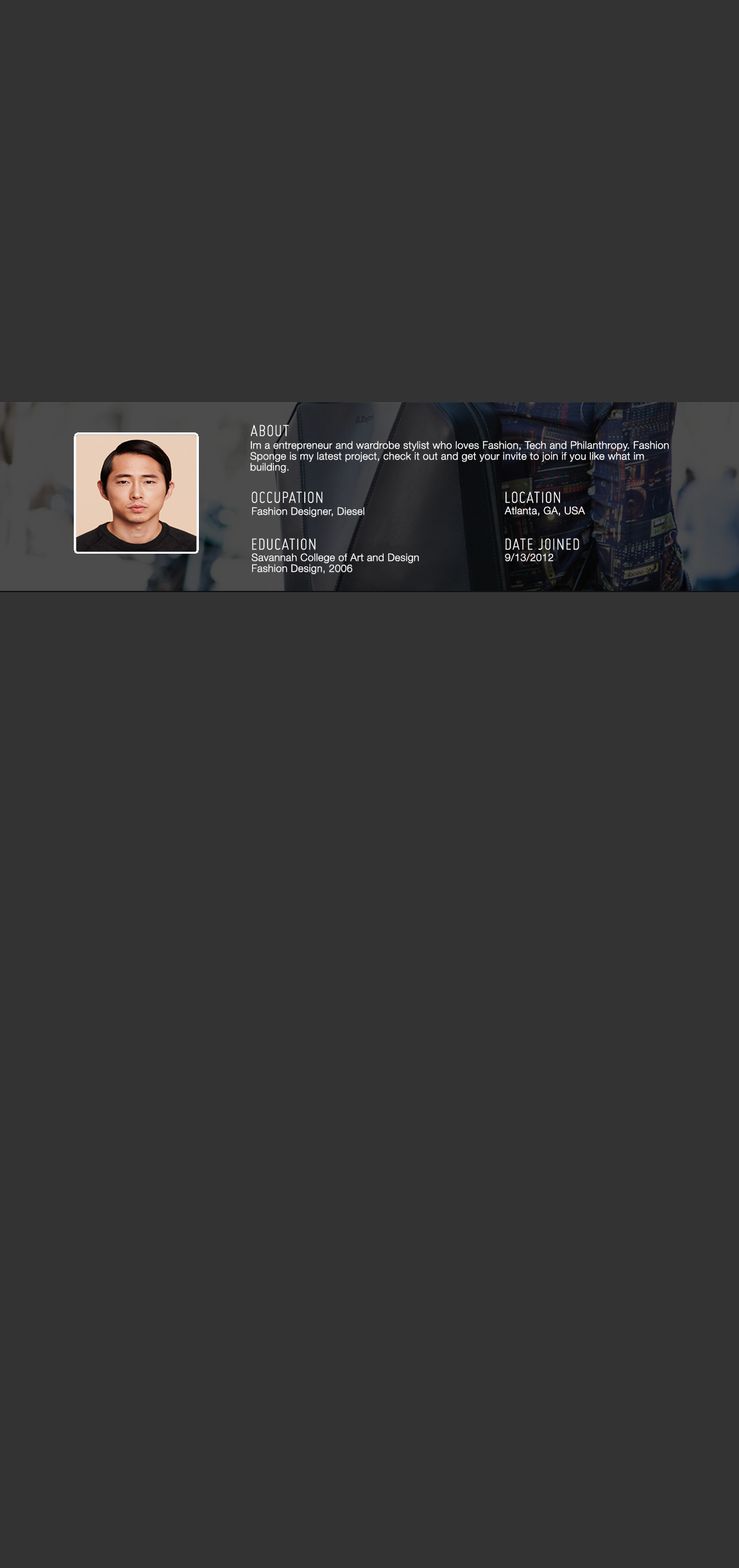
<style>
.page{position:relative;width:739px;height:1568px;background:#333333}
.page>*{position:absolute;margin:0}
.t1{font:18px "Miso-Light";letter-spacing:0.025em;color:#ffffff}
.t2{font:10.3px/10.9px "HelveticaNeue-Light";letter-spacing:0.025em;color:#ffffff}
.t3{font:10.3px "HelveticaNeue-Light";letter-spacing:0.025em;color:#ffffff}
</style>
<div class="page">
<p class="t1" style="left:251px;top:425px;width:38px;height:11px">ABOUT</p>
<p class="t2" style="left:250px;top:441px;width:419px;height:32px">Im a entrepreneur and wardrobe stylist who loves Fashion, Tech and Philanthropy. Fashion Sponge is my latest project, check it out and get your invite to join if you like what im building.</p>
<p class="t1" style="left:251px;top:491px;width:72px;height:12px">OCCUPATION</p>
<p class="t1" style="left:506px;top:491px;width:54px;height:12px">LOCATION</p>
<p class="t3" style="left:252px;top:507px;width:112px;height:10px">Fashion Designer, Diesel</p>
<p class="t3" style="left:504px;top:506px;width:81px;height:10px">Atlanta, GA, USA</p>
<p class="t1" style="left:252px;top:538px;width:64px;height:12px">EDUCATION</p>
<p class="t1" style="left:506px;top:538px;width:73px;height:12px">DATE JOINED</p>
<p class="t2" style="left:251px;top:553px;width:168px;height:21px">Savannah College of Art and Design<br>Fashion Design, 2006</p>
<p class="t3" style="left:505px;top:553px;width:49px;height:8px">9/13/2012</p>
</div>
